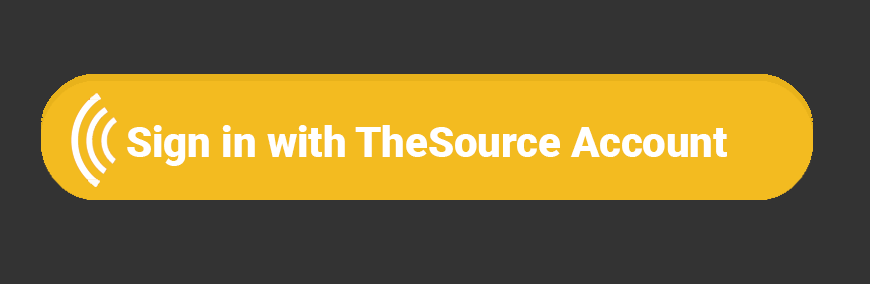
<style>
.page{position:relative;width:870px;height:284px;background:#333333}
.page>*{position:absolute;margin:0}
.t1{font:41.7px "Roboto-Black";color:#ffffff}
</style>
<div class="page">
<p class="t1" style="left:127px;top:125px;width:600px;height:41px">Sign in with TheSource Account</p>
</div>
